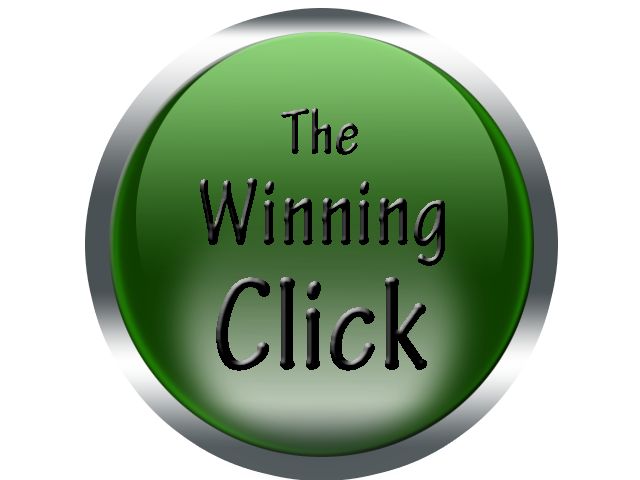
<style>
.page{position:relative;width:640px;height:480px;background:#ffffff}
.page>*{position:absolute;margin:0}
.t1{font:70px "TektonPro-BoldCond"}
.t2{font:100px "TektonPro-BoldCond";color:#000000}
.t3{font:140px "TektonPro-BoldCond";color:#000000}
</style>
<div class="page">
<p class="t1" style="left:281px;top:108px;width:77px;height:47px">The</p>
<p class="t2" style="left:200px;top:178px;width:245px;height:88px">Winning</p>
<p class="t3" style="left:216px;top:277px;width:211px;height:94px">Click</p>
</div>
